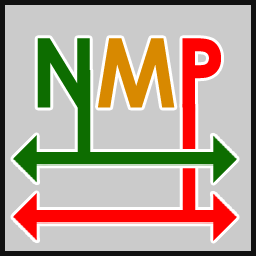
<style>
.page{position:relative;width:256px;height:256px;background:#cbcbcb}
.page>*{position:absolute;margin:0}
.t1{font:96px "CenturyGothic-Bold";letter-spacing:-0.015em;scale:0.94 1}
</style>
<div class="page">
<p class="t1" style="left:37px;top:38px;width:184px;height:70px">NMP</p>
</div>
